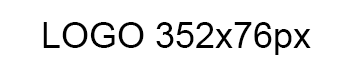
<style>
.page{position:relative;width:352px;height:72px;background:#ffffff}
.page>*{position:absolute;margin:0}
.t1{font:36px "ArialMT";color:#000000}
</style>
<div class="page">
<p class="t1" style="left:43px;top:22px;width:268px;height:33px">LOGO 352x76px</p>
</div>
